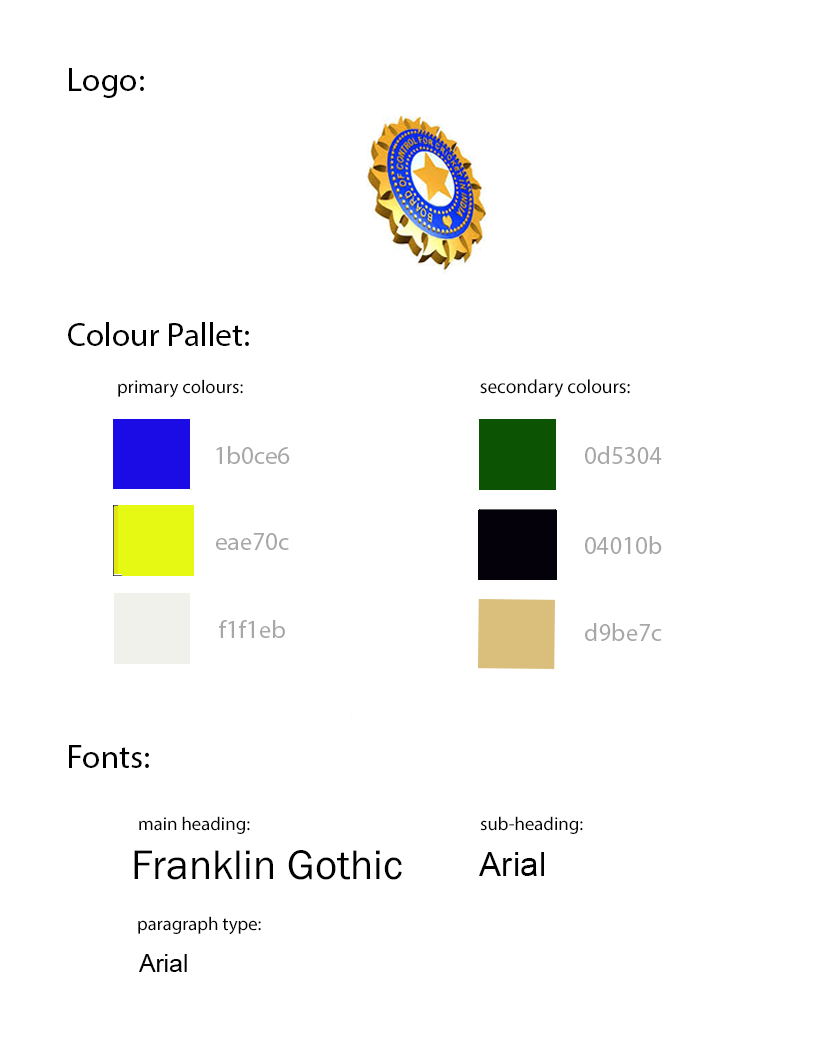
<style>
.page{position:relative;width:818px;height:1039px;background:#ffffff}
.page>*{position:absolute;margin:0}
.t1{font:33.3px "MyriadPro-Regular";color:#000000}
.t2{font:18.7px "MyriadPro-Regular";color:#000000}
.t3{font:19.4px "MyriadPro-Regular";color:#000000}
.t4{font:25px "MyriadPro-Regular";color:#a7a7a7}
.t5{font:42.9px "FranklinGothic-Book";color:#000000}
.t6{font:33.3px "ArialMT";color:#000000}
.t7{font:25px "ArialMT";color:#000000}
</style>
<div class="page">
<p class="t1" style="left:69px;top:68px;width:75px;height:30px">Logo:</p>
<p class="t1" style="left:68px;top:322px;width:181px;height:24px">Colour Pallet:</p>
<p class="t2" style="left:118px;top:379px;width:125px;height:19px">primary colours:</p>
<p class="t3" style="left:480px;top:379px;width:150px;height:19px">secondary colours:</p>
<p class="t4" style="left:216px;top:446px;width:74px;height:18px">1b0ce6</p>
<p class="t4" style="left:585px;top:446px;width:77px;height:18px">0d5304</p>
<p class="t4" style="left:216px;top:533px;width:73px;height:17px">eae70c</p>
<p class="t4" style="left:585px;top:536px;width:77px;height:18px">04010b</p>
<p class="t4" style="left:219px;top:620px;width:66px;height:18px">f1f1eb</p>
<p class="t4" style="left:585px;top:623px;width:77px;height:18px">d9be7c</p>
<p class="t1" style="left:69px;top:745px;width:80px;height:23px">Fonts:</p>
<p class="t2" style="left:139px;top:816px;width:111px;height:18px">main heading:</p>
<p class="t2" style="left:480px;top:816px;width:103px;height:18px">sub-heading:</p>
<p class="t5" style="left:134px;top:850px;width:268px;height:30px">Franklin Gothic</p>
<p class="t6" style="left:479px;top:852px;width:65px;height:24px">Arial</p>
<p class="t2" style="left:138px;top:916px;width:123px;height:19px">paragraph type:</p>
<p class="t7" style="left:139px;top:954px;width:48px;height:18px">Arial</p>
</div>
